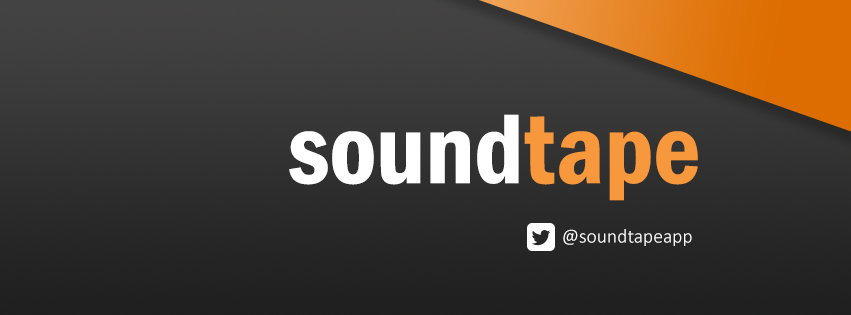
<style>
.page{position:relative;width:851px;height:315px}
.page>*{position:absolute;margin:0}
.t1{font:102.5px "FranklinGothic-DemiCond";color:#ffffff}
.t2{font:102.5px "FranklinGothic-DemiCond";color:#f6983b}
.t3{font:19.7px "Calibri-Light";color:#ffffff}
</style>
<div class="page">
<p class="t1" style="left:289px;top:114px;width:409px;height:87px">sound<span class="t2">tape</span></p>
<p class="t3" style="left:563px;top:229px;width:129px;height:17px">@soundtapeapp</p>
</div>
